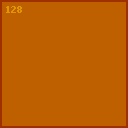
<style>
.page{position:relative;width:128px;height:128px;background:#bf6000}
.page>*{position:absolute;margin:0}
.t1{font:9px "Verdana-Bold";letter-spacing:-0.025em;color:#e19500;text-transform:uppercase}
</style>
<div class="page">
<p class="t1" style="left:6px;top:6px;width:16px;height:7px">128</p>
</div>
